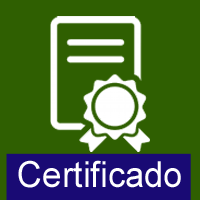
<style>
.page{position:relative;width:200px;height:200px;background:#2f5f01}
.page>*{position:absolute;margin:0}
.t1{font:36px "ArialMT";color:#ffffff;scale:0.96 1}
</style>
<div class="page">
<p class="t1" style="left:18px;top:160px;width:163px;height:28px">Certificado</p>
</div>
